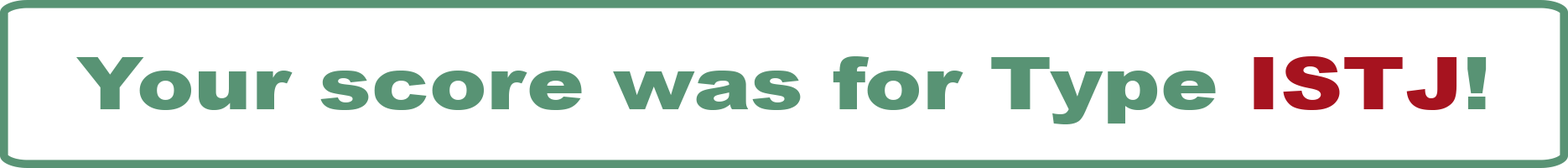
<style>
.page{position:relative;width:1568px;height:168px;background:#ffffff}
.page>*{position:absolute;margin:0}
.t1{font:73px "Arial-Black";color:#589374;scale:1.18 1}
.t2{font:73px "Arial-Black";color:#a6131f;scale:1.18 1}
</style>
<div class="page">
<p class="t1" style="left:76px;top:56px;width:1411px;height:68px">Your score was for Type <span class="t2">ISTJ</span>!</p>
</div>
